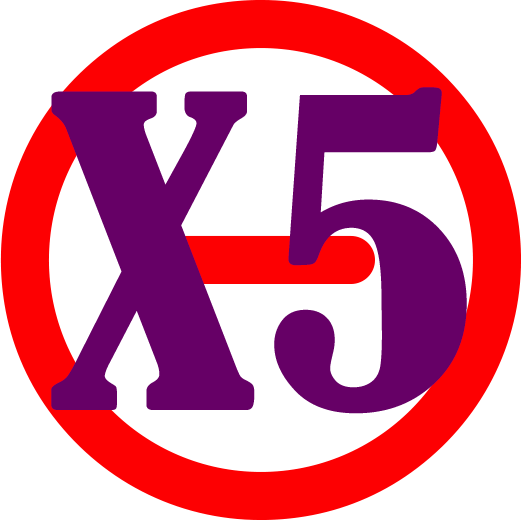
<style>
.page{position:relative;width:521px;height:520px;background:#ffffff}
.page>*{position:absolute;margin:0}
.t1{font:403.7px "BernardMT-Condensed";color:#660066;scale:1.11 1}
</style>
<div class="page">
<p class="t1" style="left:51px;top:87px;width:416px;height:327px">X5</p>
</div>
